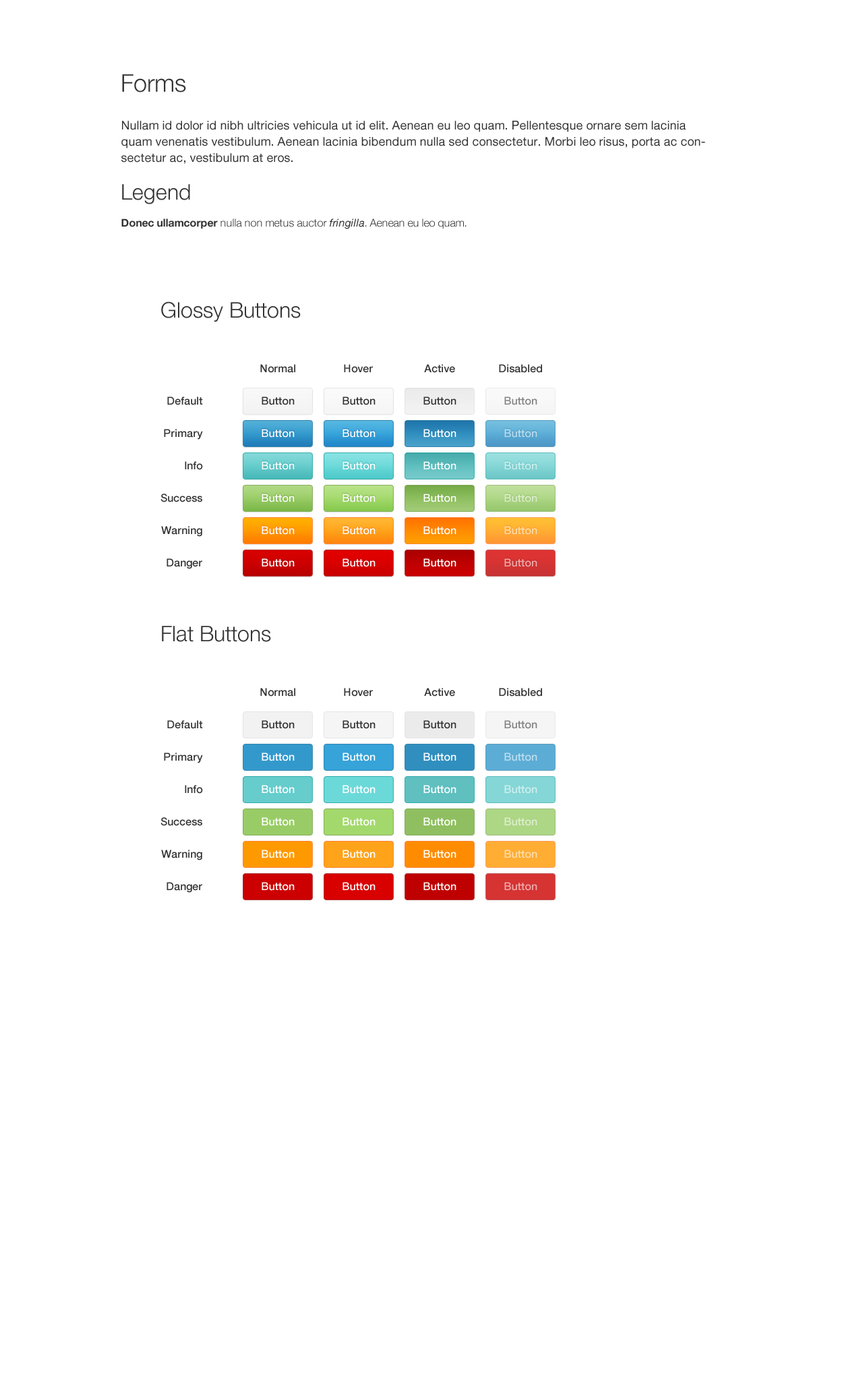
<style>
.page{position:relative;width:863px;height:1381px;background:#ffffff}
.page>*{position:absolute;margin:0}
.t1{font:12.1px/16.2px "HelveticaNeue";color:#333333}
.t2{font:24.3px/32.4px "HelveticaNeue-Light";color:#333333}
.t3{font:21.6px/27px "HelveticaNeue-Light";color:#333333}
.t4{font:10.8px/16.2px "HelveticaNeue-Bold";color:#333333}
.t5{font:10.8px/16.2px "HelveticaNeue-Light";color:#333333}
.t6{font:10.8px/16.2px "HelveticaNeue-Italic";color:#333333}
.t7{font:21.6px "HelveticaNeue-Light";color:#333333}
.t8{font:10.8px "HelveticaNeue-Medium";color:#333333}
.t9{font:10.8px "HelveticaNeue-Medium";color:#828282}
.t10{font:10.8px "HelveticaNeue-Medium";color:#ffffff}
.t11{font:10.8px "HelveticaNeue-Medium";color:#bedeef}
.t12{font:10.8px "HelveticaNeue-Medium";color:#ceefef}
.t13{font:10.8px "HelveticaNeue-Medium";color:#deefce}
.t14{font:10.8px "HelveticaNeue-Medium";color:#ffdead}
.t15{font:10.8px "HelveticaNeue-Medium";color:#efadad}
.t16{font:10.8px "HelveticaNeue-Medium";color:#818181}
</style>
<div class="page">
<p class="t1" style="left:121px;top:74px;width:584px;height:155px"><span class="t2">Forms <br></span>Nullam id dolor id nibh ultricies vehicula ut id elit. Aenean eu leo quam. Pellentesque ornare sem lacinia quam venenatis vestibulum. Aenean lacinia bibendum nulla sed consectetur. Morbi leo risus, porta ac consectetur ac, vestibulum at eros.<br><span class="t3">Legend<br></span><span class="t4">Donec ullamcorper</span><span class="t5"> nulla non metus auctor </span><span class="t6">fringilla</span><span class="t5">. Aenean eu leo quam.</span></p>
<p class="t7" style="left:161px;top:301px;width:140px;height:21px">Glossy Buttons</p>
<p class="t8" style="left:260px;top:364px;width:35px;height:9px">Normal</p>
<p class="t8" style="left:344px;top:364px;width:29px;height:9px">Hover</p>
<p class="t8" style="left:424px;top:364px;width:31px;height:9px">Active</p>
<p class="t8" style="left:499px;top:364px;width:43px;height:9px">Disabled</p>
<p class="t8" style="left:167px;top:397px;width:36px;height:8px">Default</p>
<p class="t8" style="left:262px;top:397px;width:33px;height:8px">Button</p>
<p class="t8" style="left:343px;top:397px;width:33px;height:8px">Button</p>
<p class="t8" style="left:424px;top:397px;width:33px;height:8px">Button</p>
<p class="t9" style="left:504px;top:397px;width:34px;height:8px">Button</p>
<p class="t8" style="left:164px;top:429px;width:39px;height:11px">Primary</p>
<p class="t10" style="left:262px;top:429px;width:33px;height:9px">Button</p>
<p class="t10" style="left:343px;top:429px;width:33px;height:9px">Button</p>
<p class="t10" style="left:424px;top:429px;width:33px;height:9px">Button</p>
<p class="t11" style="left:504px;top:429px;width:34px;height:9px">Button</p>
<p class="t8" style="left:185px;top:461px;width:18px;height:9px">Info</p>
<p class="t10" style="left:262px;top:461px;width:33px;height:9px">Button</p>
<p class="t10" style="left:343px;top:461px;width:33px;height:9px">Button</p>
<p class="t10" style="left:424px;top:461px;width:33px;height:9px">Button</p>
<p class="t12" style="left:504px;top:461px;width:34px;height:9px">Button</p>
<p class="t8" style="left:161px;top:494px;width:41px;height:8px">Success</p>
<p class="t10" style="left:262px;top:494px;width:33px;height:8px">Button</p>
<p class="t10" style="left:343px;top:494px;width:33px;height:8px">Button</p>
<p class="t10" style="left:424px;top:494px;width:33px;height:8px">Button</p>
<p class="t13" style="left:504px;top:494px;width:34px;height:8px">Button</p>
<p class="t8" style="left:161px;top:526px;width:41px;height:11px">Warning</p>
<p class="t10" style="left:262px;top:526px;width:33px;height:9px">Button</p>
<p class="t10" style="left:343px;top:526px;width:33px;height:9px">Button</p>
<p class="t10" style="left:424px;top:526px;width:33px;height:9px">Button</p>
<p class="t14" style="left:504px;top:526px;width:34px;height:9px">Button</p>
<p class="t8" style="left:167px;top:558px;width:35px;height:11px">Danger</p>
<p class="t10" style="left:262px;top:558px;width:33px;height:9px">Button</p>
<p class="t10" style="left:343px;top:558px;width:33px;height:9px">Button</p>
<p class="t10" style="left:424px;top:558px;width:33px;height:9px">Button</p>
<p class="t15" style="left:504px;top:558px;width:34px;height:9px">Button</p>
<p class="t7" style="left:162px;top:626px;width:109px;height:16px">Flat Buttons</p>
<p class="t8" style="left:260px;top:688px;width:35px;height:9px">Normal</p>
<p class="t8" style="left:344px;top:688px;width:29px;height:9px">Hover</p>
<p class="t8" style="left:424px;top:688px;width:31px;height:9px">Active</p>
<p class="t8" style="left:499px;top:688px;width:43px;height:9px">Disabled</p>
<p class="t8" style="left:167px;top:720px;width:36px;height:9px">Default</p>
<p class="t8" style="left:262px;top:720px;width:33px;height:9px">Button</p>
<p class="t8" style="left:343px;top:720px;width:33px;height:9px">Button</p>
<p class="t8" style="left:424px;top:720px;width:33px;height:9px">Button</p>
<p class="t16" style="left:504px;top:720px;width:34px;height:9px">Button</p>
<p class="t8" style="left:164px;top:753px;width:39px;height:10px">Primary</p>
<p class="t10" style="left:262px;top:753px;width:33px;height:8px">Button</p>
<p class="t10" style="left:343px;top:753px;width:33px;height:8px">Button</p>
<p class="t10" style="left:424px;top:753px;width:33px;height:8px">Button</p>
<p class="t11" style="left:504px;top:753px;width:34px;height:8px">Button</p>
<p class="t8" style="left:185px;top:785px;width:18px;height:9px">Info</p>
<p class="t10" style="left:262px;top:785px;width:33px;height:9px">Button</p>
<p class="t10" style="left:343px;top:785px;width:33px;height:9px">Button</p>
<p class="t10" style="left:424px;top:785px;width:33px;height:9px">Button</p>
<p class="t12" style="left:504px;top:785px;width:34px;height:9px">Button</p>
<p class="t8" style="left:161px;top:817px;width:41px;height:9px">Success</p>
<p class="t10" style="left:262px;top:817px;width:33px;height:9px">Button</p>
<p class="t10" style="left:343px;top:817px;width:33px;height:9px">Button</p>
<p class="t10" style="left:424px;top:817px;width:33px;height:9px">Button</p>
<p class="t13" style="left:504px;top:817px;width:34px;height:9px">Button</p>
<p class="t8" style="left:161px;top:850px;width:41px;height:11px">Warning</p>
<p class="t10" style="left:262px;top:850px;width:33px;height:9px">Button</p>
<p class="t10" style="left:343px;top:850px;width:33px;height:9px">Button</p>
<p class="t10" style="left:424px;top:850px;width:33px;height:9px">Button</p>
<p class="t14" style="left:504px;top:850px;width:34px;height:9px">Button</p>
<p class="t8" style="left:167px;top:882px;width:35px;height:11px">Danger</p>
<p class="t10" style="left:262px;top:882px;width:33px;height:9px">Button</p>
<p class="t10" style="left:343px;top:882px;width:33px;height:9px">Button</p>
<p class="t10" style="left:424px;top:882px;width:33px;height:9px">Button</p>
<p class="t15" style="left:504px;top:882px;width:34px;height:9px">Button</p>
</div>
